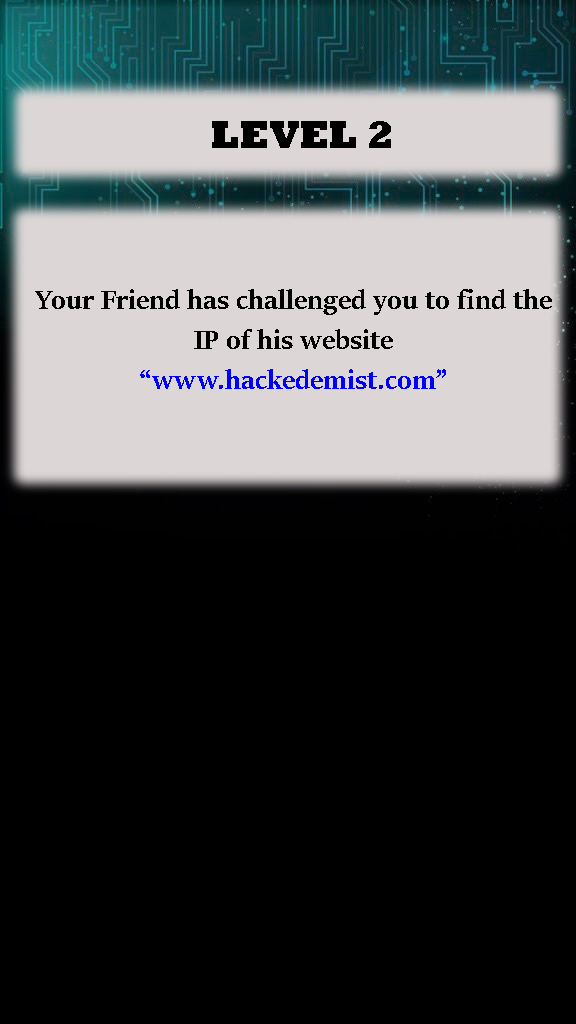
<style>
.page{position:relative;width:576px;height:1024px;background:#000000}
.page>*{position:absolute;margin:0}
.t1{font:40px "Rockwell-ExtraBold";color:#000000}
.t2{font:30px/10px "SitkaBanner-Bold";color:#000000}
.t3{font:30px/10px "SitkaBanner-Bold";color:#0000ff}
</style>
<div class="page">
<p class="t1" style="left:212px;top:121px;width:179px;height:27px">LEVEL 2</p>
<p class="t2" style="left:35px;top:289px;width:517px;height:100px;text-align:center">Your Friend has challenged you to find the<br> <br><br><br>IP of his website <br><br><br><br><span class="t3">“www.hackedemist.com”</span></p>
</div>
